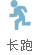
<style>
.page{position:relative;width:40px;height:55px;background:#ffffff}
.page>*{position:absolute;margin:0}
.t1{font:22.7px "SimSun";letter-spacing:0.075em;color:#666666;font-variant:small-caps}
</style>
<div class="page">
<p class="t1" style="left:7px;top:39px;width:25px;height:12px">长跑</p>
</div>
